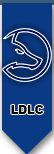
<style>
.page{position:relative;width:54px;height:154px;background:#0b3a84}
.page>*{position:absolute;margin:0}
.t1{font:11.7px "Arial-Black";letter-spacing:-0.01em;color:#000000}
</style>
<div class="page">
<p class="t1" style="left:11px;top:105px;width:33px;height:9px">LDLC</p>
</div>
